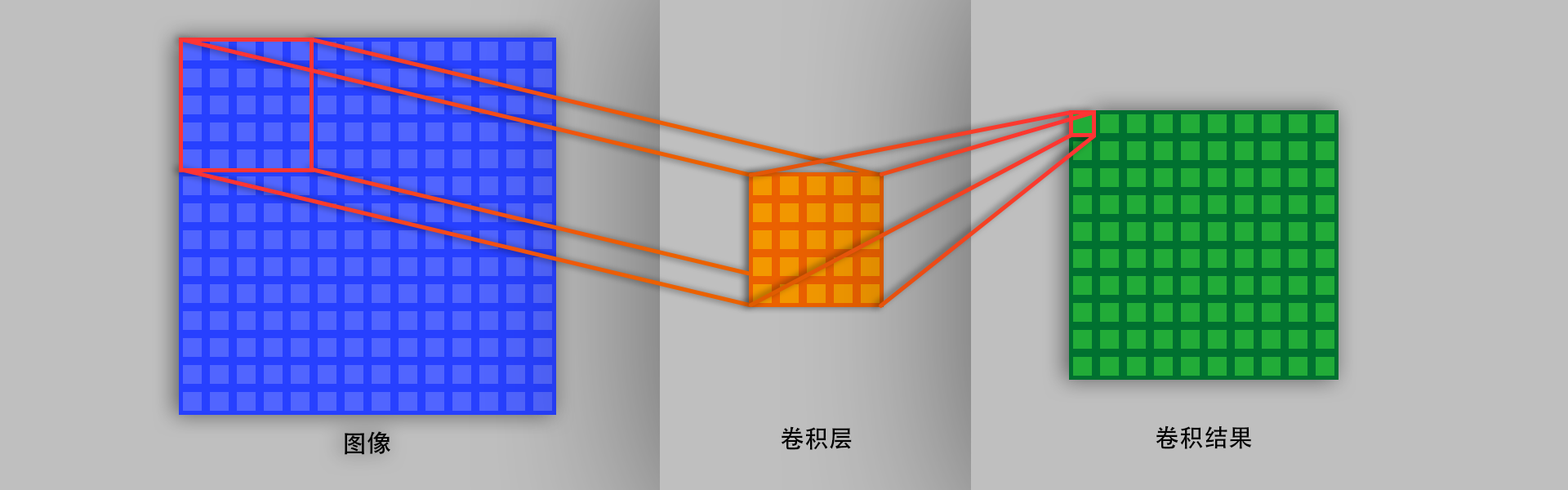
<style>
.page{position:relative;width:1568px;height:490px;background:#bfbfbf}
.page>*{position:absolute;margin:0}
.t1{font:24.5px "AdobeHeitiStd-Regular";color:#000000}
</style>
<div class="page">
<p class="t1" style="left:1156px;top:425px;width:96px;height:24px">卷积结果</p>
<p class="t1" style="left:345px;top:431px;width:45px;height:24px">图像</p>
<p class="t1" style="left:781px;top:426px;width:71px;height:24px">卷积层</p>
</div>
